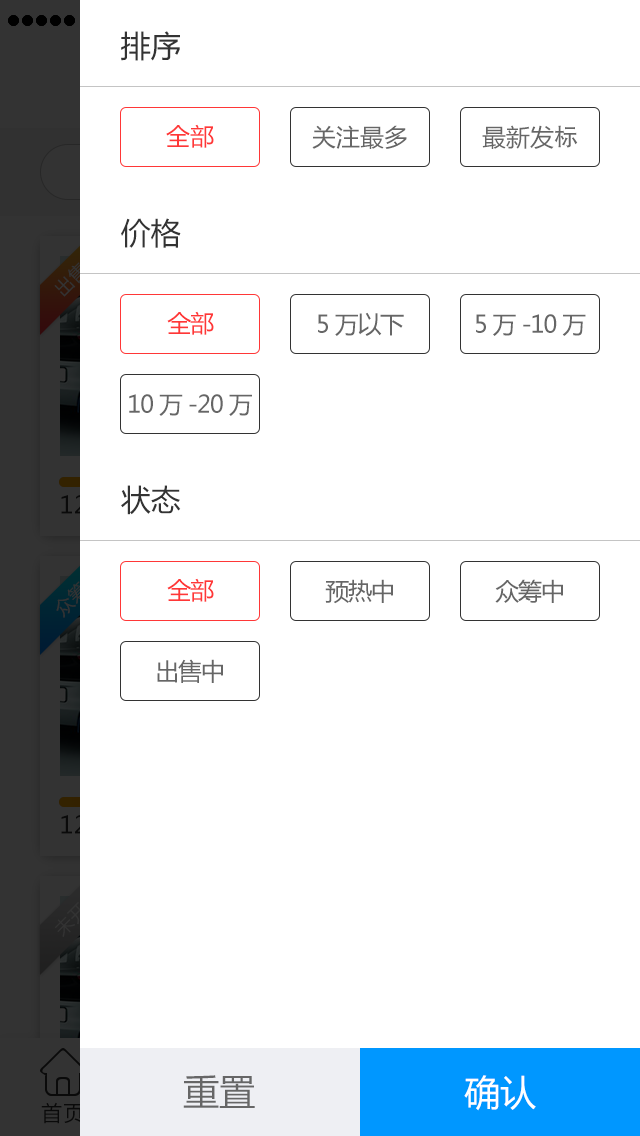
<style>
.page{position:relative;width:640px;height:1136px;background:#ffffff}
.page>*{position:absolute;margin:0}
.t1{font:30px "MicrosoftYaHei";color:#333333}
.t2{font:24px "MicrosoftYaHei";color:#ff3737}
.t3{font:24px "MicrosoftYaHei";color:#666666}
.t4{font:24px "AdobeHeitiStd-Regular";color:#666666}
.t5{font:24px "MicrosoftYaHei";letter-spacing:-0.05em;color:#ff3737}
.t6{font:24px "MicrosoftYaHei";letter-spacing:-0.05em;color:#666666}
.t7{font:36px "MicrosoftYaHei";color:#666666}
.t8{font:36px "MicrosoftYaHei";color:#ffffff}
</style>
<div class="page">
<p class="t1" style="left:121px;top:31px;width:59px;height:30px">排序</p>
<p class="t2" style="left:166px;top:124px;width:48px;height:24px">全部</p>
<p class="t3" style="left:312px;top:125px;width:95px;height:24px">关注最多</p>
<p class="t3" style="left:482px;top:125px;width:96px;height:24px">最新发<span class="t4">标</span></p>
<p class="t1" style="left:121px;top:218px;width:60px;height:30px">价格</p>
<p class="t5" style="left:167px;top:311px;width:47px;height:24px">全部</p>
<p class="t6" style="left:318px;top:312px;width:86px;height:24px">5万以下</p>
<p class="t6" style="left:476px;top:314px;width:110px;height:22px">5万-10万</p>
<p class="t6" style="left:129px;top:394px;width:123px;height:22px">10万-20万</p>
<p class="t1" style="left:121px;top:485px;width:60px;height:30px">状态</p>
<p class="t5" style="left:167px;top:578px;width:47px;height:24px">全部</p>
<p class="t6" style="left:325px;top:579px;width:68px;height:25px">预热中</p>
<p class="t6" style="left:495px;top:579px;width:68px;height:24px">众筹中</p>
<p class="t6" style="left:157px;top:659px;width:66px;height:24px">出售中</p>
<p class="t7" style="left:183px;top:1075px;width:72px;height:33px">重置</p>
<p class="t8" style="left:464px;top:1075px;width:72px;height:36px">确认</p>
</div>
